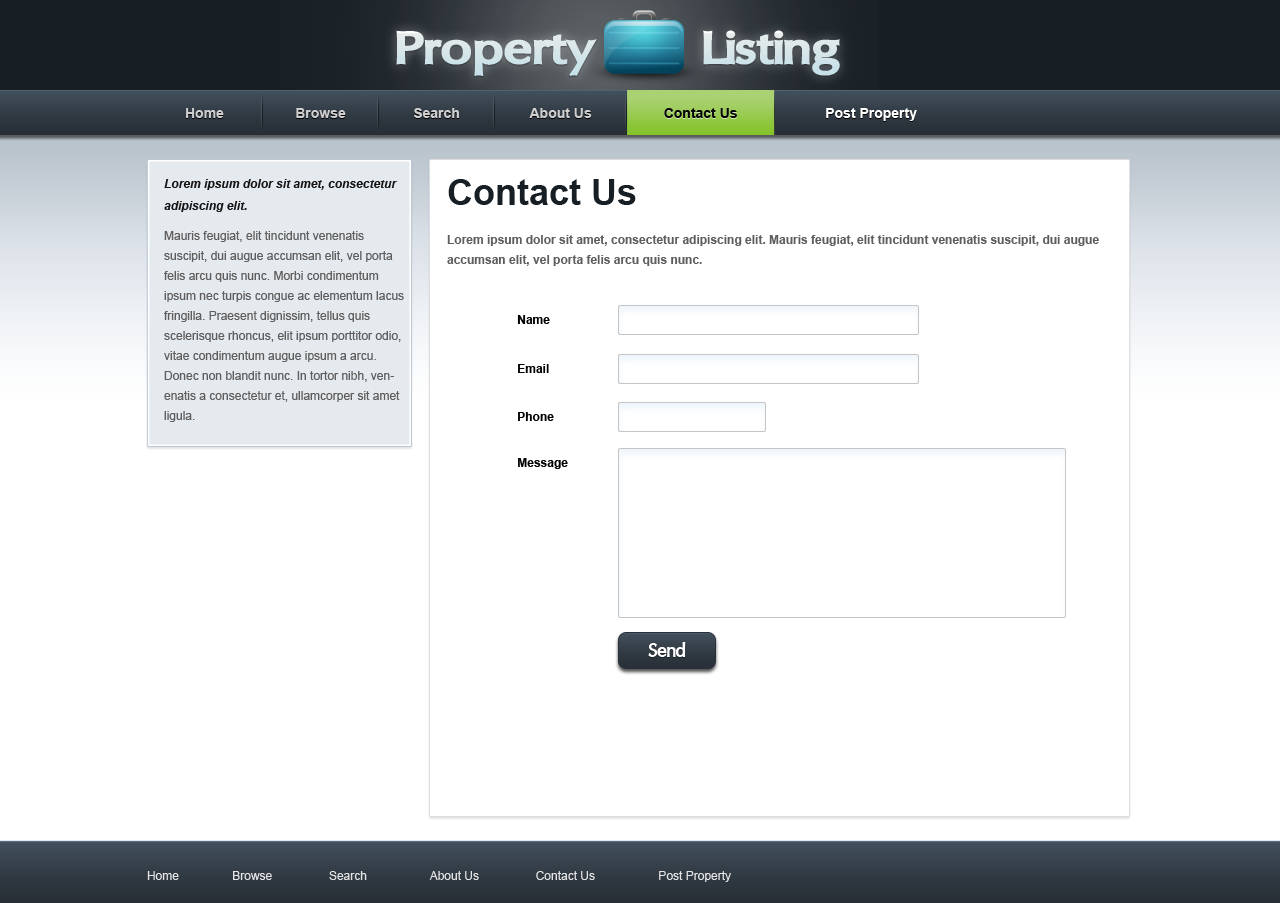
<style>
.page{position:relative;width:1280px;height:903px;background:#ffffff}
.page>*{position:absolute;margin:0}
.t1{font:48px "OregonLDOExtendedBlack";color:#d8e6ea}
.t2{font:14px "Arial-BoldMT";color:#cfcfcf}
.t3{font:14px "Arial-BoldMT";color:#070806}
.t4{font:14px "Arial-BoldMT";color:#ffffff}
.t5{font:12px/20px "ArialMT";color:#5e5e5e}
.t6{font:12px/22px "Arial-BoldItalicMT";color:#161515}
.t7{font:12px/30px "ArialMT";color:#5e5e5e}
.t8{font:36px "Arial-BoldMT";color:#171e24}
.t9{font:12px/20px "Arial-BoldMT";color:#5e5e5e}
.t10{font:12px "Arial-BoldMT";color:#010101}
.t11{font:20px "OregonLDOExtraBold";letter-spacing:-0.025em;color:#ffffff}
.t12{font:12px "ArialMT";color:#e5e4e4}
</style>
<div class="page">
<p class="t1" style="left:396px;top:30px;width:444px;height:46px">Property        Listing</p>
<p class="t2" style="left:186px;top:108px;width:38px;height:10px">Home</p>
<p class="t2" style="left:296px;top:108px;width:50px;height:10px">Browse</p>
<p class="t2" style="left:414px;top:108px;width:45px;height:10px">Search</p>
<p class="t2" style="left:529px;top:108px;width:63px;height:10px">About Us</p>
<p class="t3" style="left:664px;top:108px;width:73px;height:10px">Contact Us</p>
<p class="t4" style="left:826px;top:108px;width:91px;height:13px">Post Property</p>
<p class="t5" style="left:164px;top:179px;width:240px;height:243px"><span class="t6">Lorem ipsum dolor sit amet, consectetur adipiscing elit. <br></span><span class="t7">Mauris feugiat, elit tincidunt venenatis </span>suscipit, dui augue accumsan elit, vel porta felis arcu quis nunc. Morbi condimentum ipsum nec turpis congue ac elementum lacus fringilla. Praesent dignissim, tellus quis scelerisque rhoncus, elit ipsum porttitor odio, vitae condimentum augue ipsum a arcu. Donec non blandit nunc. In tortor nibh, venenatis a consectetur et, ullamcorper sit amet ligula.</p>
<p class="t8" style="left:448px;top:179px;width:188px;height:26px">Contact Us</p>
<p class="t9" style="left:447px;top:235px;width:652px;height:31px">Lorem ipsum dolor sit amet, consectetur adipiscing elit. Mauris feugiat, elit tincidunt venenatis suscipit, dui augue accumsan elit, vel porta felis arcu quis nunc.</p>
<p class="t10" style="left:517px;top:315px;width:33px;height:9px">Name</p>
<p class="t10" style="left:518px;top:364px;width:31px;height:9px">Email</p>
<p class="t10" style="left:518px;top:412px;width:36px;height:9px">Phone</p>
<p class="t10" style="left:518px;top:458px;width:50px;height:11px">Message</p>
<p class="t11" style="left:648px;top:642px;width:38px;height:15px">Send</p>
<p class="t12" style="left:147px;top:871px;width:584px;height:11px">Home                Browse                 Search                   About Us                 Contact Us                   Post Property</p>
</div>
